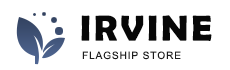
<style>
.page{position:relative;width:230px;height:70px;background:#ffffff}
.page>*{position:absolute;margin:0}
.t1{font:36.3px "BerlinSansFBDemi-Bold";letter-spacing:0.08em;color:#070707;text-transform:uppercase}
.t2{font:10.2px "ArialMT";letter-spacing:0.08em;color:#1c1c1c;text-transform:uppercase}
</style>
<div class="page">
<p class="t1" style="left:81px;top:15px;width:131px;height:26px">irvine</p>
<p class="t2" style="left:82px;top:51px;width:99px;height:9px">Flagship store</p>
</div>
